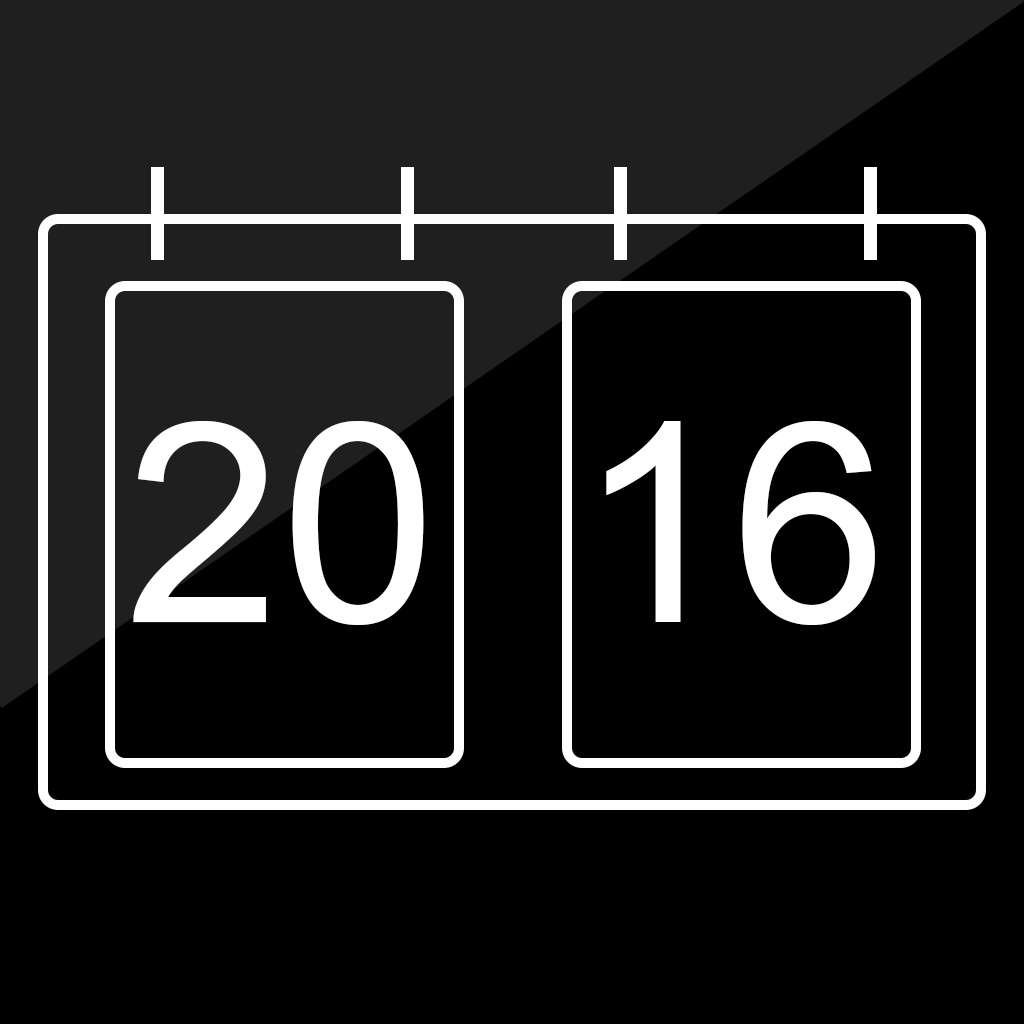
<style>
.page{position:relative;width:1024px;height:1024px;background:#000000}
.page>*{position:absolute;margin:0}
.t1{font:280px "ArialMT";color:#ffffff}
</style>
<div class="page">
<p class="t1" style="left:133px;top:421px;width:291px;height:204px">20</p>
<p class="t1" style="left:606px;top:421px;width:269px;height:204px">16</p>
</div>
